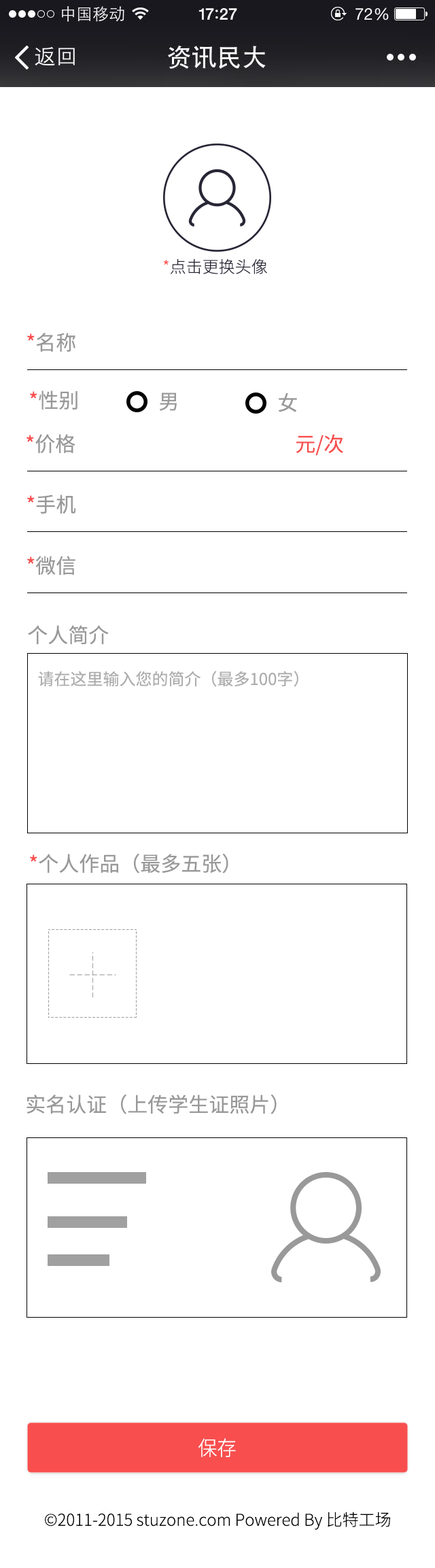
<style>
.page{position:relative;width:435px;height:1568px;background:#ffffff}
.page>*{position:absolute;margin:0}
.t1{font:16.3px "NotoSansHans-Light";color:#272636}
.t2{font:16.3px "NotoSansHans-Light";color:#f84e4e}
.t3{font:20.4px "NotoSansHans-Regular";color:#999999}
.t4{font:20.4px "NotoSansHans-Regular";color:#f84e4e}
.t5{font:16.3px "NotoSansHans-Regular";color:#adadad}
.t6{font:20.4px "NotoSansHans-Light";color:#ffffff;scale:0.94 1}
.t7{font:16.3px "NotoSansHans-Light";color:#000000}
</style>
<div class="page">
<p class="t1" style="left:163px;top:258px;width:104px;height:16px"><span class="t2">*</span>点击更换头像</p>
<p class="t3" style="left:27px;top:333px;width:49px;height:19px"><span class="t4">*</span>名称</p>
<p class="t3" style="left:30px;top:390px;width:48px;height:20px"><span class="t4">*</span>性别</p>
<p class="t3" style="left:159px;top:393px;width:18px;height:18px">男</p>
<p class="t3" style="left:278px;top:393px;width:19px;height:19px">女</p>
<p class="t3" style="left:27px;top:434px;width:49px;height:20px"><span class="t4">*</span>价格</p>
<p class="t4" style="left:296px;top:434px;width:48px;height:22px">元/次</p>
<p class="t3" style="left:27px;top:495px;width:49px;height:19px"><span class="t4">*</span>手机</p>
<p class="t3" style="left:27px;top:556px;width:49px;height:20px"><span class="t4">*</span>微信</p>
<p class="t3" style="left:28px;top:625px;width:81px;height:19px">个人简介</p>
<p class="t5" style="left:38px;top:671px;width:261px;height:16px">请在这里输入您的简介（最多100字）</p>
<p class="t3" style="left:30px;top:853px;width:199px;height:20px"><span class="t4">*</span>个人作品（最多五张）</p>
<p class="t3" style="left:27px;top:1094px;width:250px;height:20px">实名认证（上传学生证照片）</p>
<p class="t6" style="left:199px;top:1438px;width:37px;height:19px">保存</p>
<p class="t7" style="left:45px;top:1512px;width:345px;height:18px">©2011-2015 stuzone.com Powered By 比特工场</p>
</div>
